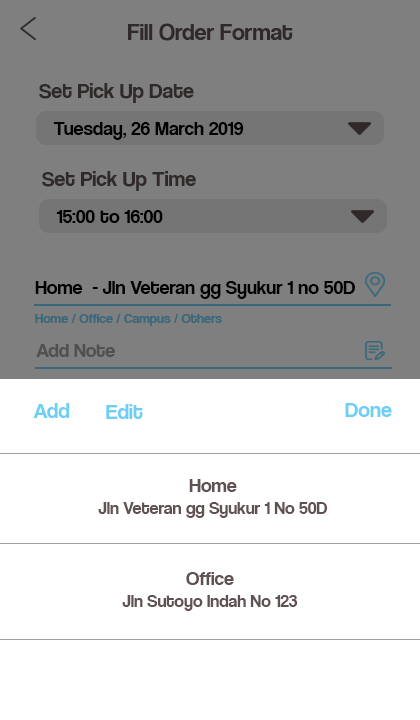
<style>
.page{position:relative;width:420px;height:720px;background:#ffffff}
.page>*{position:absolute;margin:0}
.t1{font:24px "CoolveticaRg-Regular";color:#302929}
.t2{font:22px "CoolveticaRg-Regular";color:#302929}
.t3{font:20px "CoolveticaRg-Regular";color:#000000}
.t4{font:14px "CoolveticaRg-Regular";color:#36677b}
.t5{font:20px "CoolveticaRg-Regular";color:#505050}
.t6{font:22px "CoolveticaRg-Regular";color:#6dcff6}
.t7{font:18px "CoolveticaRg-Regular";color:#605252}
.t8{font:20px "CoolveticaRg-Regular";color:#605252}
</style>
<div class="page">
<p class="t1" style="left:128px;top:23px;width:165px;height:18px">Fill Order Format</p>
<p class="t2" style="left:39px;top:83px;width:155px;height:20px">Set Pick Up Date</p>
<p class="t3" style="left:53px;top:122px;width:191px;height:18px">Tuesday, 26 March 2019</p>
<p class="t2" style="left:42px;top:171px;width:154px;height:20px">Set Pick Up Time</p>
<p class="t3" style="left:56px;top:210px;width:107px;height:13px">15:00 to 16:00</p>
<p class="t3" style="left:35px;top:281px;width:320px;height:18px">Home  - Jln Veteran gg Syukur 1 no 50D</p>
<p class="t4" style="left:35px;top:314px;width:187px;height:12px">Home / Office / Campus / Others</p>
<p class="t5" style="left:36px;top:344px;width:79px;height:13px">Add Note</p>
<p class="t6" style="left:33px;top:403px;width:37px;height:15px">Add</p>
<p class="t6" style="left:106px;top:404px;width:37px;height:15px">Edit</p>
<p class="t6" style="left:345px;top:403px;width:47px;height:14px">Done</p>
<p class="t7" style="left:98px;top:479px;width:230px;height:39px;text-align:center"><span class="t8">Home<br></span>Jln Veteran gg Syukur 1 No 50D</p>
<p class="t7" style="left:122px;top:572px;width:176px;height:39px;text-align:center"><span class="t8">Office<br></span>Jln Sutoyo Indah No 123</p>
</div>
